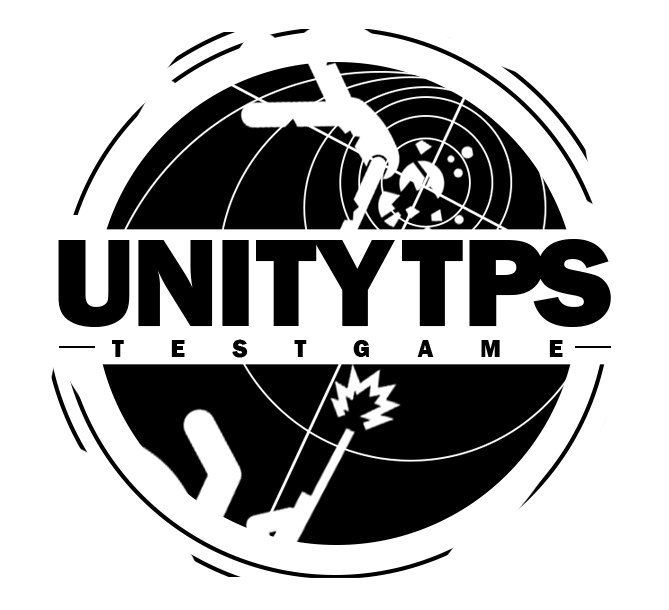
<style>
.page{position:relative;width:669px;height:610px;background:#ffffff}
.page>*{position:absolute;margin:0}
.t1{font:129.3px "FranklinGothic-Heavy";letter-spacing:-0.04em;color:#000000}
.t2{font:129.3px "FranklinGothic-Heavy";color:#000000}
.t3{font:129.3px "FranklinGothic-Heavy";letter-spacing:-0.1em;color:#000000}
.t4{font:129.3px "FranklinGothic-Heavy";letter-spacing:-0.08em;color:#000000}
.t5{font:25.2px "FranklinGothic-Heavy";letter-spacing:1.86em;color:#000000}
</style>
<div class="page">
<p class="t1" style="left:58px;top:239px;width:553px;height:88px">UN<span class="t2">IT</span><span class="t3">Y </span><span class="t2">T</span><span class="t4">PS</span></p>
<p class="t5" style="left:112px;top:339px;width:451px;height:19px">TESTGAME</p>
</div>
